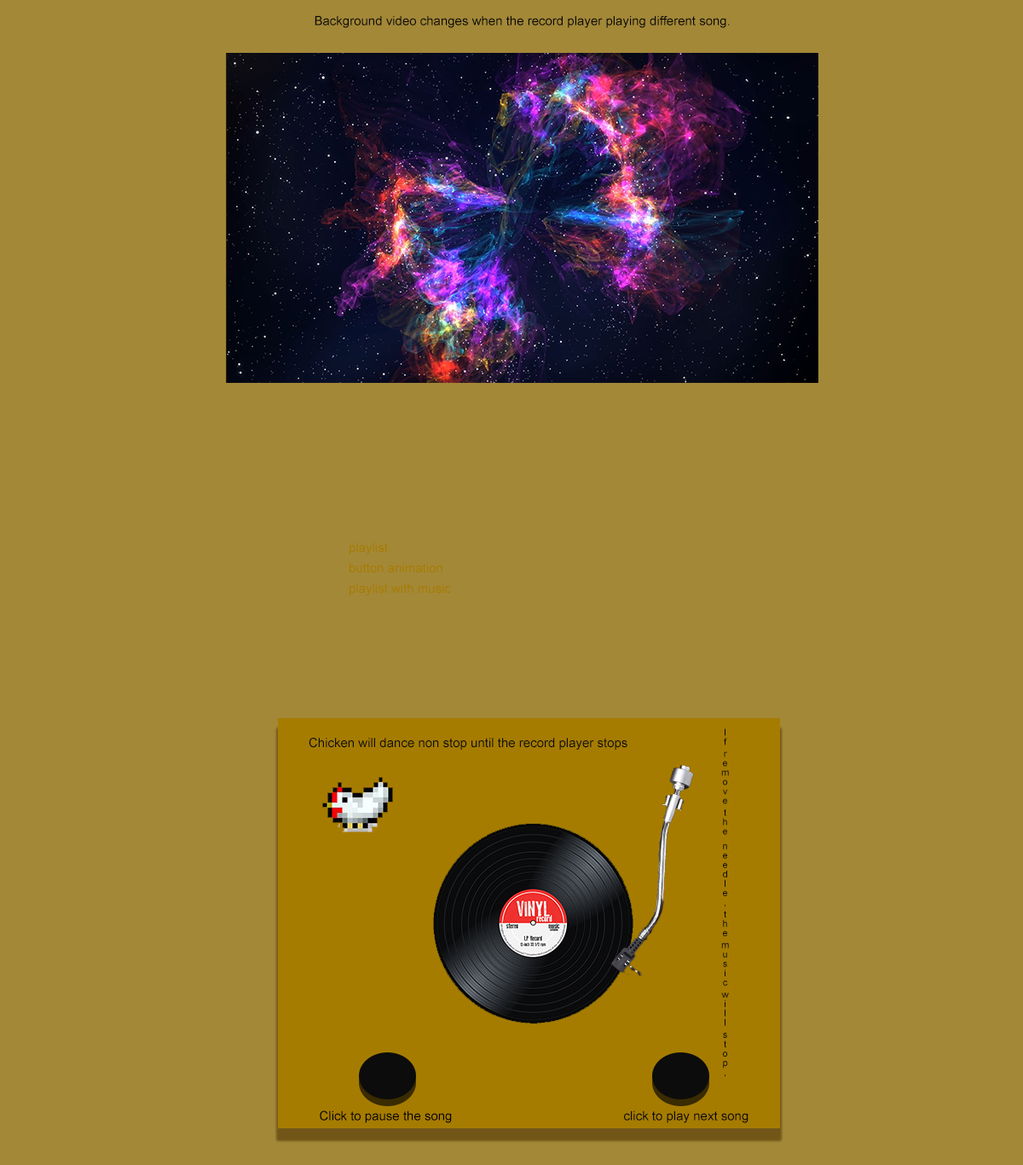
<style>
.page{position:relative;width:1023px;height:1165px;background:#a38838}
.page>*{position:absolute;margin:0}
.t1{font:12.8px "ArialMT";color:#080808}
.t2{font:12.8px/20.5px "ArialMT";color:#a67c00}
.t3{font:12.8px "ArialMT";color:#0e0f0e}
.t4{font:9.4px/51.2px "ArialMT";color:#0b0b0b}
.t5{font:12.8px "ArialMT";color:#020202}
.t6{font:12.8px "ArialMT";color:#090909}
</style>
<div class="page">
<p class="t1" style="left:315px;top:15px;width:415px;height:13px">Background video changes when the record player playing different song.</p>
<p class="t2" style="left:350px;top:542px;width:101px;height:53px">playlist<br>button animation<br>playlist with music</p>
<p class="t3" style="left:309px;top:738px;width:319px;height:12px">Chicken will dance non stop until the record player stops</p>
<p class="t4" style="left:722px;top:728px;width:7px;height:349px">If remove the  needle, the music will stop,</p>
<p class="t5" style="left:320px;top:1110px;width:132px;height:13px">Click to pause the song</p>
<p class="t6" style="left:624px;top:1110px;width:125px;height:13px">click to play next song</p>
</div>
